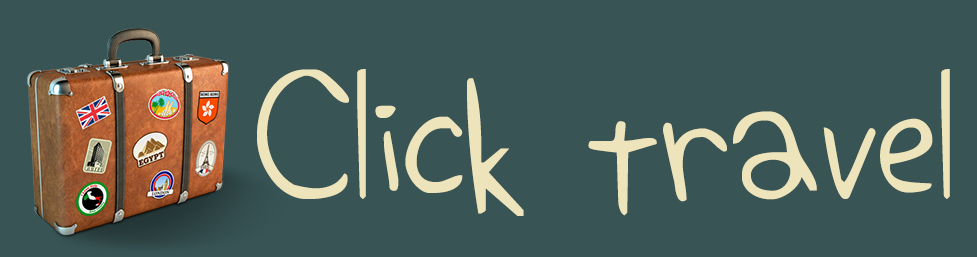
<style>
.page{position:relative;width:977px;height:257px;background:#385455}
.page>*{position:absolute;margin:0}
.t1{font:118.1px "ElephantHiccups";color:#ede4bb}
</style>
<div class="page">
<p class="t1" style="left:257px;top:69px;width:693px;height:147px">Click travel</p>
</div>
